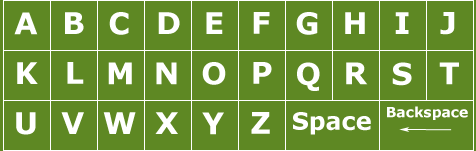
<style>
.page{position:relative;width:476px;height:151px;background:#5e8823}
.page>*{position:absolute;margin:0}
.t1{font:30px "Verdana-Bold";color:#ffffff}
.t2{font:24px "Verdana-Bold";color:#ffffff}
.t3{font:14px "Verdana-Bold";color:#ffffff}
</style>
<div class="page">
<p class="t1" style="left:14px;top:12px;width:24px;height:23px">A</p>
<p class="t1" style="left:65px;top:12px;width:19px;height:22px">B</p>
<p class="t1" style="left:109px;top:12px;width:20px;height:23px">C</p>
<p class="t1" style="left:158px;top:12px;width:22px;height:22px">D</p>
<p class="t1" style="left:206px;top:12px;width:17px;height:22px">E</p>
<p class="t1" style="left:253px;top:12px;width:17px;height:22px">F</p>
<p class="t1" style="left:296px;top:12px;width:22px;height:23px">G</p>
<p class="t1" style="left:345px;top:12px;width:20px;height:22px">H</p>
<p class="t1" style="left:395px;top:12px;width:14px;height:22px">I</p>
<p class="t1" style="left:440px;top:12px;width:15px;height:23px">J</p>
<p class="t1" style="left:17px;top:62px;width:21px;height:22px">K</p>
<p class="t1" style="left:67px;top:62px;width:17px;height:22px">L</p>
<p class="t1" style="left:108px;top:62px;width:24px;height:23px">M</p>
<p class="t1" style="left:156px;top:62px;width:21px;height:23px">N</p>
<p class="t1" style="left:202px;top:62px;width:24px;height:23px">O</p>
<p class="t1" style="left:253px;top:62px;width:19px;height:22px">P</p>
<p class="t1" style="left:297px;top:62px;width:23px;height:29px">Q</p>
<p class="t1" style="left:346px;top:62px;width:22px;height:23px">R</p>
<p class="t1" style="left:392px;top:62px;width:20px;height:24px">S</p>
<p class="t1" style="left:439px;top:62px;width:20px;height:23px">T</p>
<p class="t1" style="left:16px;top:112px;width:20px;height:23px">U</p>
<p class="t1" style="left:61px;top:112px;width:23px;height:22px">V</p>
<p class="t1" style="left:103px;top:112px;width:33px;height:22px">W</p>
<p class="t1" style="left:155px;top:112px;width:23px;height:22px">X</p>
<p class="t1" style="left:202px;top:112px;width:22px;height:23px">Y</p>
<p class="t1" style="left:251px;top:112px;width:19px;height:22px">Z</p>
<p class="t2" style="left:293px;top:112px;width:78px;height:23px">Space</p>
<p class="t3" style="left:387px;top:106px;width:81px;height:14px">Backspace</p>
</div>
